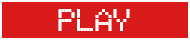
<style>
.page{position:relative;width:190px;height:40px;background:#d81a1a}
.page>*{position:absolute;margin:0}
.t1{font:30px "ElectronicHighwaySign";color:#ffffff}
</style>
<div class="page">
<p class="t1" style="left:58px;top:9px;width:72px;height:22px">PLAY</p>
</div>
